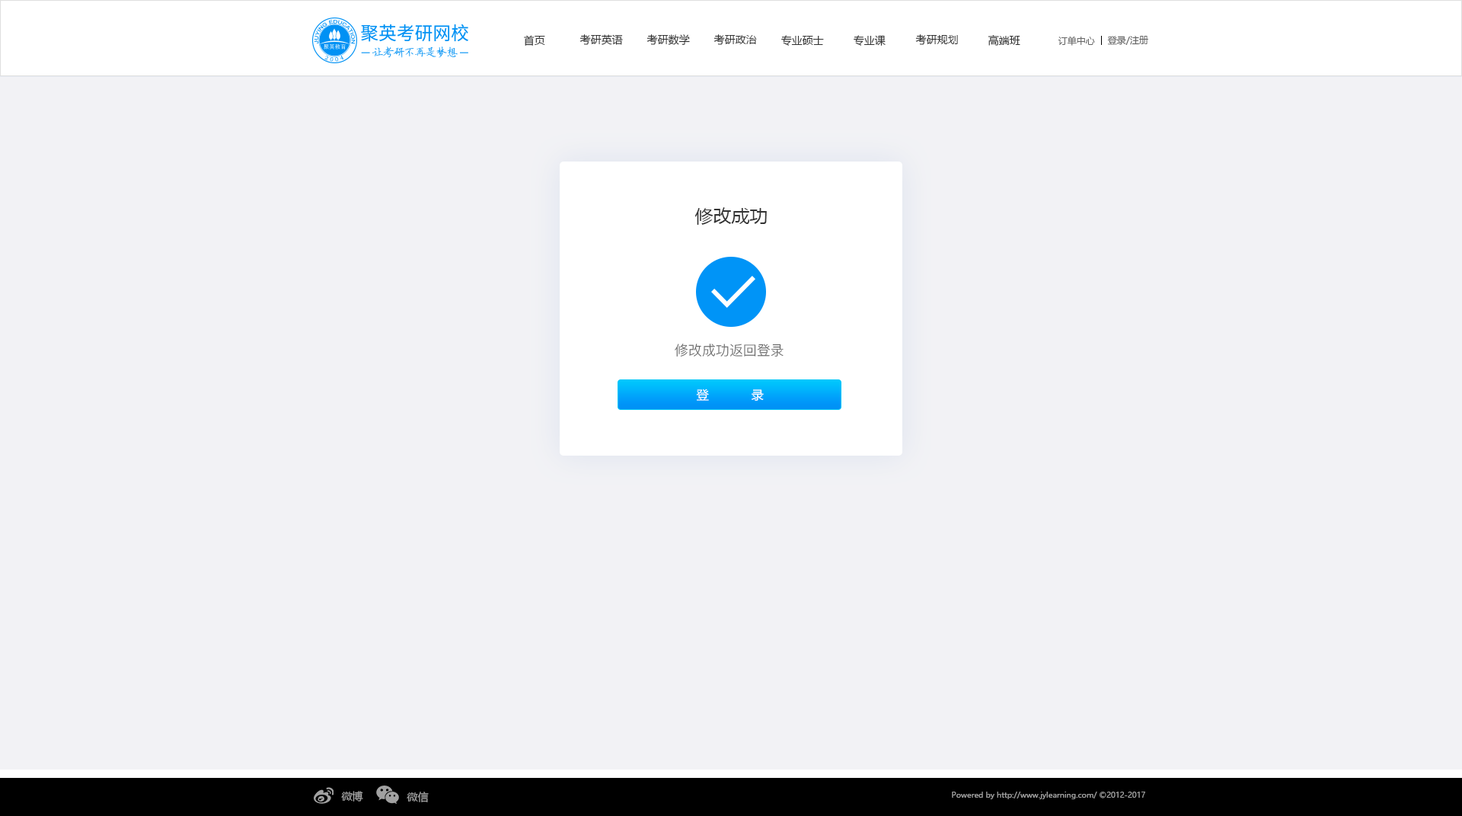
<style>
.page{position:relative;width:1462px;height:816px;background:#f2f2f5}
.page>*{position:absolute;margin:0}
.t1{font:10.7px "MicrosoftYaHei";color:#333333}
.t2{font:9.1px "MicrosoftYaHei";color:#666666}
.t3{font:18.3px "MicrosoftYaHei";color:#333333}
.t4{font:13.7px "PingFang-SC-Regular";color:#666666}
.t5{font:12.2px "MicrosoftYaHei";color:#ffffff}
.t6{font:10.7px "MicrosoftYaHei";color:#a1a1a1}
.t7{font:7.6px "MicrosoftYaHei";color:#a1a1a1}
</style>
<div class="page">
<p class="t1" style="left:524px;top:35px;width:21px;height:11px">首页</p>
<p class="t1" style="left:580px;top:34px;width:43px;height:11px">考研英语</p>
<p class="t1" style="left:647px;top:34px;width:43px;height:11px">考研数学</p>
<p class="t1" style="left:714px;top:34px;width:43px;height:11px">考研政治</p>
<p class="t1" style="left:781px;top:35px;width:43px;height:11px">专业硕士</p>
<p class="t1" style="left:854px;top:35px;width:32px;height:11px">专业课</p>
<p class="t1" style="left:915px;top:34px;width:43px;height:11px">考研规划</p>
<p class="t1" style="left:988px;top:35px;width:32px;height:11px">高端班</p>
<p class="t2" style="left:1058px;top:36px;width:37px;height:10px">订单中心</p>
<p class="t2" style="left:1107px;top:36px;width:41px;height:9px">登录/注册</p>
<p class="t3" style="left:694px;top:207px;width:73px;height:18px">修改成功</p>
<p class="t4" style="left:675px;top:343px;width:109px;height:13px">修改成功返回登录</p>
<p class="t5" style="left:696px;top:388px;width:68px;height:13px">登  录</p>
<p class="t6" style="left:341px;top:790px;width:22px;height:11px">微博</p>
<p class="t6" style="left:407px;top:791px;width:22px;height:11px">微信</p>
<p class="t7" style="left:952px;top:791px;width:193px;height:8px">Powered by http://www.jylearning.com/ ©2012-2017</p>
</div>
